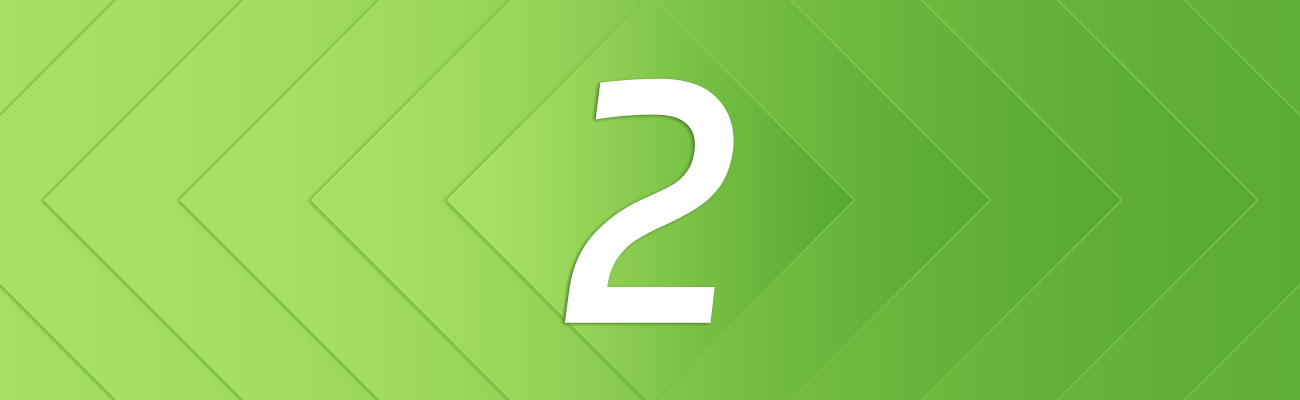
<style>
.page{position:relative;width:1300px;height:400px}
.page>*{position:absolute;margin:0}
.t1{font:324.7px "DingTalk-JinBuTi";letter-spacing:0.1em;color:#ffffff}
</style>
<div class="page">
<p class="t1" style="left:564px;top:78px;width:170px;height:245px">2</p>
</div>
